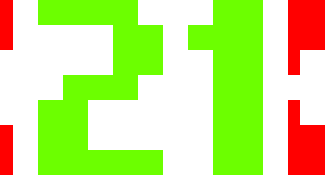
<style>
.page{position:relative;width:325px;height:175px;background:#ffffff}
.page>*{position:absolute;margin:0}
.t1{font:200px "NokiaCellphoneFC-Small";color:#6cff00;text-transform:uppercase}
</style>
<div class="page">
<p class="t1" style="left:38px;top:0px;width:225px;height:175px">01</p>
<p class="t1" style="left:38px;top:0px;width:225px;height:175px">21</p>
</div>
